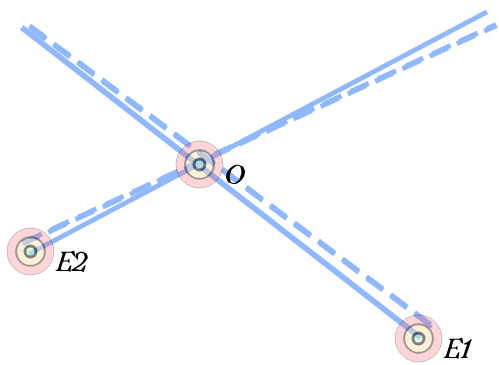
<style>
.page{position:relative;width:499px;height:365px;background:#ffffff}
.page>*{position:absolute;margin:0}
.t1{font:24px "Avara-BoldItalic";color:#000000}
</style>
<div class="page">
<p class="t1" style="left:225px;top:164px;width:21px;height:20px">O</p>
<p class="t1" style="left:55px;top:250px;width:33px;height:22px">E2</p>
<p class="t1" style="left:443px;top:337px;width:29px;height:22px">E1</p>
</div>
